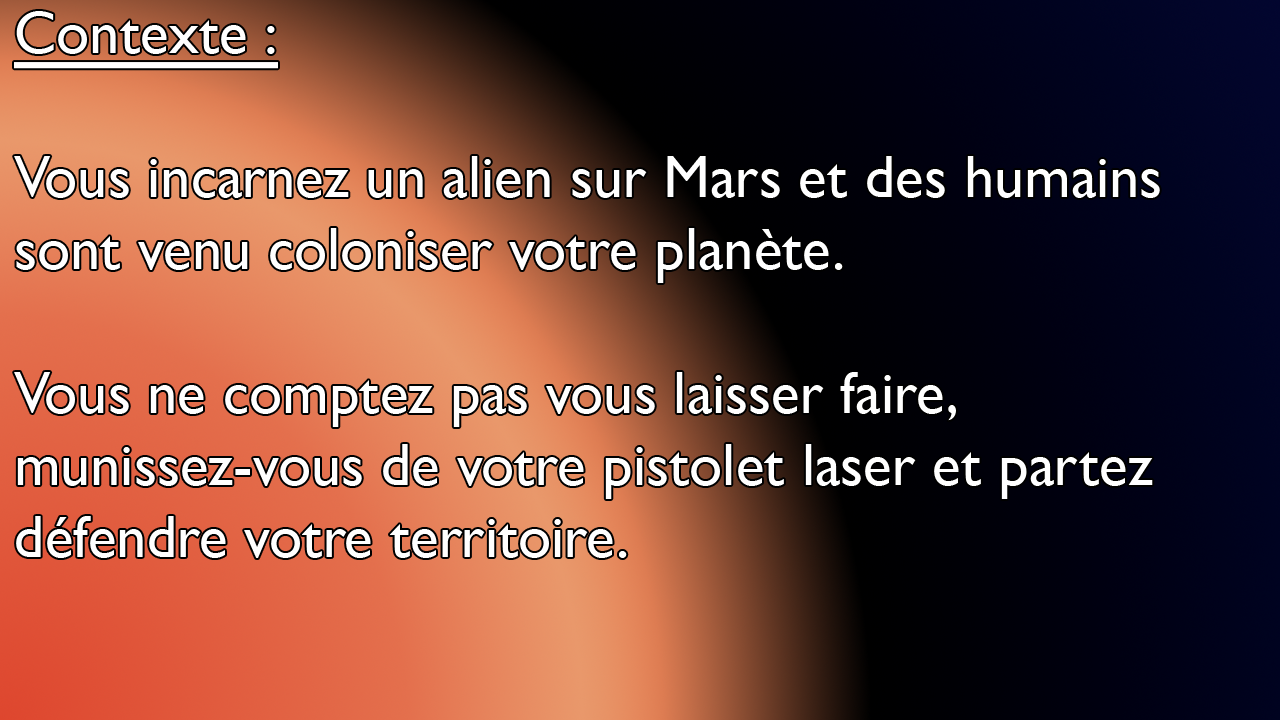
<style>
.page{position:relative;width:1280px;height:720px}
.page>*{position:absolute;margin:0}
.t1{font:60px "GillSansNova";color:#ffffff}
.t2{font:60px "GillSansNova";color:#ffffff;text-decoration:underline}
</style>
<div class="page">
<p class="t1" style="left:14px;top:11px;width:1146px;height:547px"><span class="t2">Contexte :<br></span><br>Vous incarnez un alien sur Mars et des humains<br>sont venu coloniser votre planète.<br><br>Vous ne comptez pas vous laisser faire,<br>munissez-vous de votre pistolet laser et partez<br>défendre votre territoire.</p>
</div>
